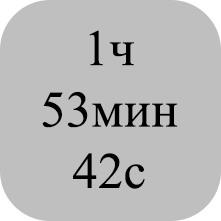
<style>
.page{position:relative;width:221px;height:221px;background:#bfbfbf}
.page>*{position:absolute;margin:0}
.t1{font:51.1px "TimesNewRomanPSMT";color:#000000}
</style>
<div class="page">
<p class="t1" style="left:42px;top:30px;width:136px;height:159px;text-align:center">1ч<br>53мин<br>42с</p>
</div>
